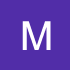
<style>
.page{position:relative;width:70px;height:70px;background:#512da8}
.page>*{position:absolute;margin:0}
.t1{font:40px "ArialMT";color:#ffffff}
</style>
<div class="page">
<p class="t1" style="left:22px;top:21px;width:29px;height:29px">M</p>
</div>
